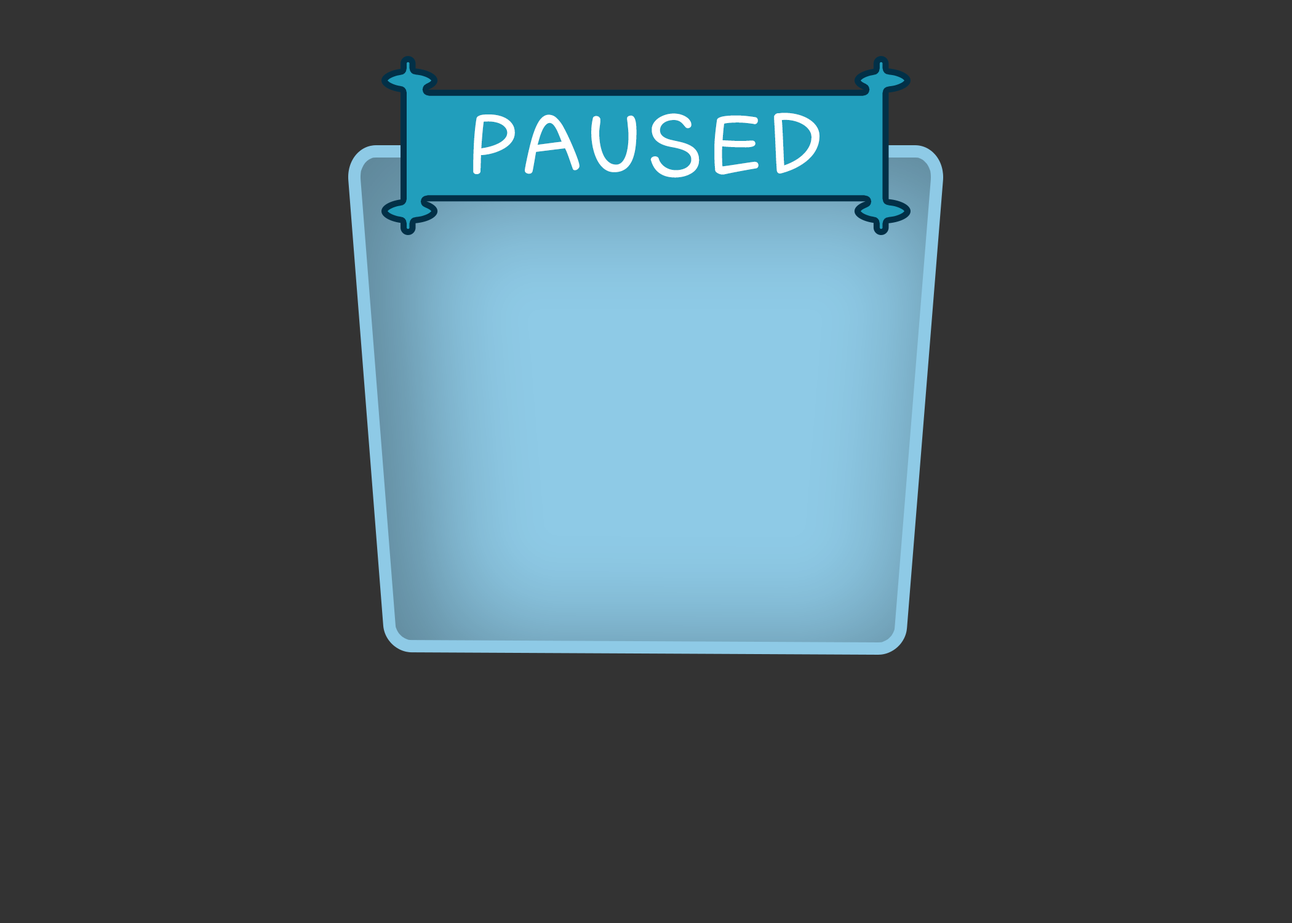
<style>
.page{position:relative;width:1292px;height:923px;background:#333333}
.page>*{position:absolute;margin:0}
.t1{font:87.2px "Chococooky";letter-spacing:0.06em;color:#ffffff;scale:1.13 1}
</style>
<div class="page">
<p class="t1" style="left:473px;top:113px;width:347px;height:65px">PAUSED</p>
</div>
